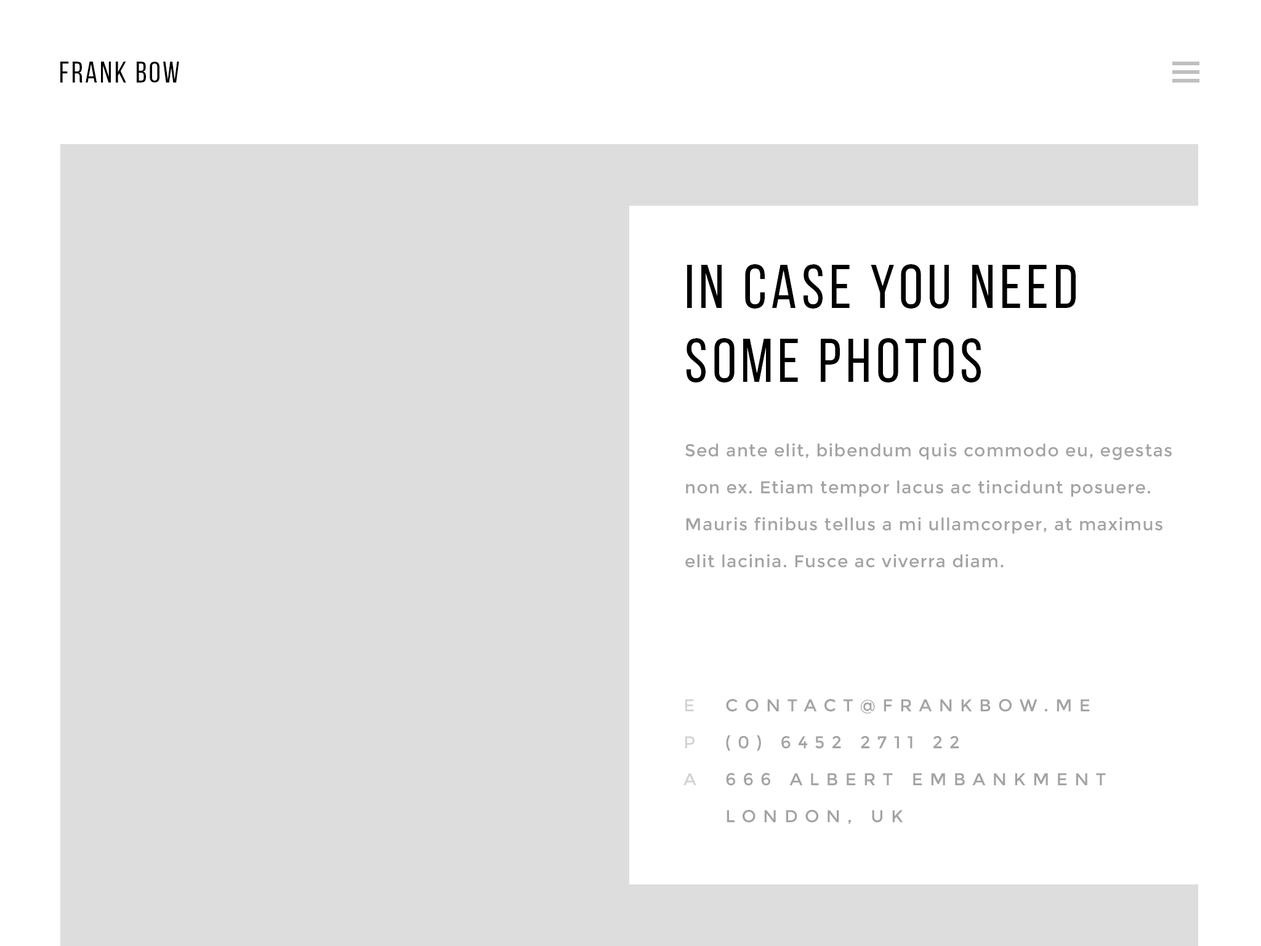
<style>
.page{position:relative;width:1261px;height:946px;background:#ffffff}
.page>*{position:absolute;margin:0}
.t1{font:29.6px "BebasNeueRegular";letter-spacing:0.075em;color:#000000;text-transform:uppercase}
.t2{font:61.6px "BebasNeueRegular";letter-spacing:0.075em;color:#000000}
.t3{font:17.2px/36.9px "Montserrat-Regular";letter-spacing:0.05em;color:#a3a3a3}
.t4{font:17.2px/36.9px "Montserrat-Regular";letter-spacing:0.4em;color:#d4d4d4;text-transform:uppercase}
.t5{font:17.2px/36.9px "Montserrat-Regular";letter-spacing:0.4em;color:#a3a3a3;text-transform:uppercase}
</style>
<div class="page">
<p class="t1" style="left:60px;top:62px;width:119px;height:21px">FRANK BOW</p>
<p class="t2" style="left:686px;top:264px;width:390px;height:118px">IN CASE YOU NEED SOME PHOTOS</p>
<p class="t3" style="left:685px;top:443px;width:487px;height:125px">Sed ante elit, bibendum quis commodo eu, egestas non ex. Etiam tempor lacus ac tincidunt posuere. Mauris finibus tellus a mi ullamcorper, at maximus elit lacinia. Fusce ac viverra diam.</p>
<p class="t4" style="left:683px;top:699px;width:13px;height:86px">E<br>P<br>A</p>
<p class="t5" style="left:726px;top:699px;width:380px;height:125px">contact@frankbow.ME<br>(0) 6452 2711 22<br>666 Albert Embankment<br>London, UK</p>
</div>
